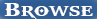
<style>
.page{position:relative;width:97px;height:19px;background:#2f5a90}
.page>*{position:absolute;margin:0}
.t1{font:20.5px "GodOfWar";color:#ffffff;scale:1.06 1}
</style>
<div class="page">
<p class="t1" style="left:4px;top:3px;width:89px;height:16px">Browse</p>
</div>
